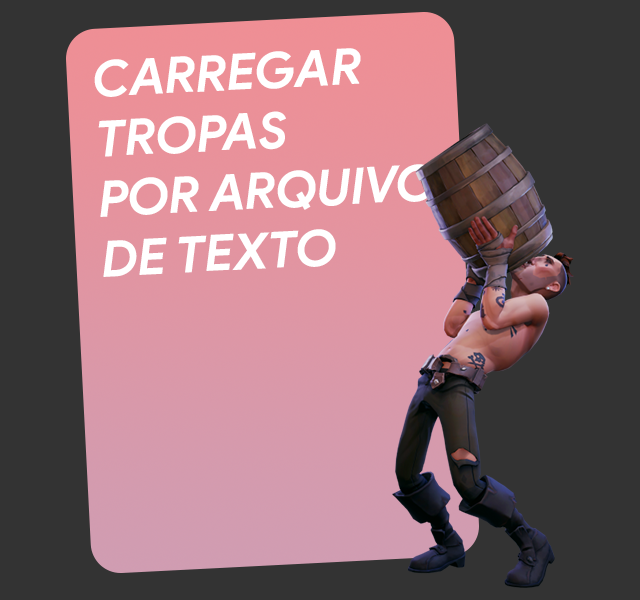
<style>
.page{position:relative;width:640px;height:600px;background:#333333}
.page>*{position:absolute;margin:0}
.t1{font:50px "ProductSans-BoldItalic";color:#ffffff}
</style>
<div class="page">
<p class="t1" style="left:94px;top:48px;width:342px;height:229px;rotate:-3deg">CARREGAR<br>TROPAS<br>POR ARQUIVO<br>DE TEXTO</p>
</div>
